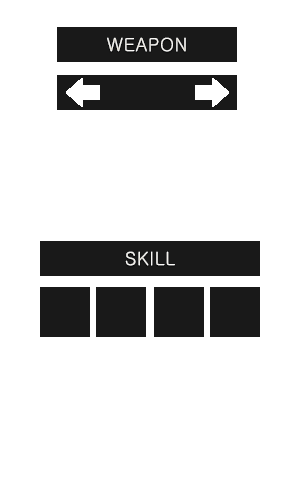
<style>
.page{position:relative;width:300px;height:500px;background:#ffffff}
.page>*{position:absolute;margin:0}
.t1{font:18px "Gulim";letter-spacing:0.04em;color:#f5f4f0;text-transform:uppercase}
.t2{font:18px "Gulim";letter-spacing:0.04em;color:#f5f3ef;text-transform:uppercase}
</style>
<div class="page">
<p class="t1" style="left:107px;top:37px;width:79px;height:15px">weapon</p>
<p class="t2" style="left:125px;top:251px;width:50px;height:15px">SKILL</p>
</div>
